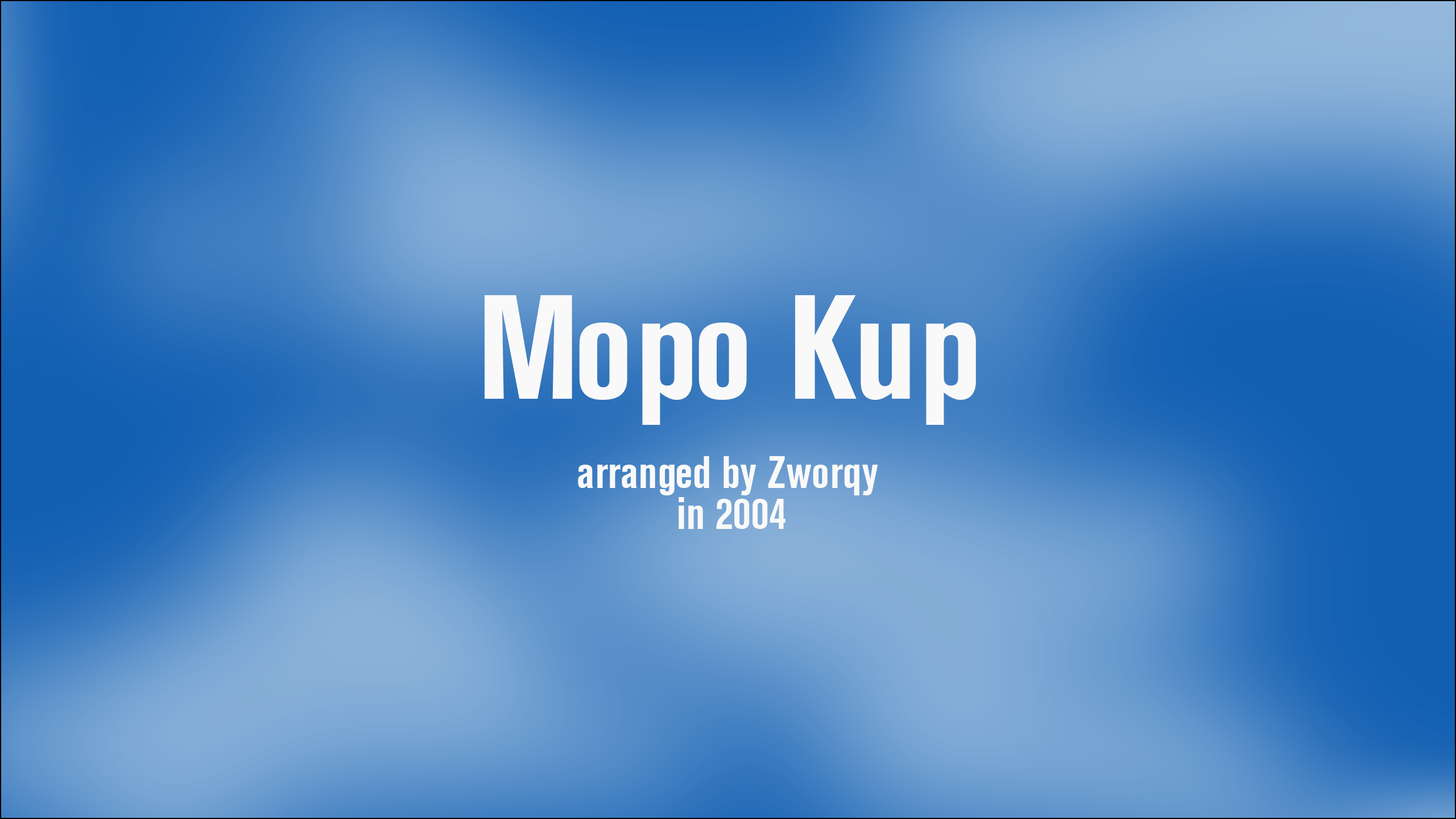
<style>
.page{position:relative;width:1456px;height:819px}
.page>*{position:absolute;margin:0}
.t1{font:146.4px "AkzidenzGroteskCn_PFL-Bold";color:#f9f9f9}
.t2{font:44px "AkzidenzGroteskCn_PFL-Bold";color:#f9f9f9}
</style>
<div class="page">
<p class="t1" style="left:485px;top:295px;width:491px;height:130px">Mopo Kup</p>
<p class="t2" style="left:578px;top:456px;width:300px;height:39px">arranged by Zworqy</p>
<p class="t2" style="left:679px;top:497px;width:106px;height:32px">in 2004</p>
</div>
